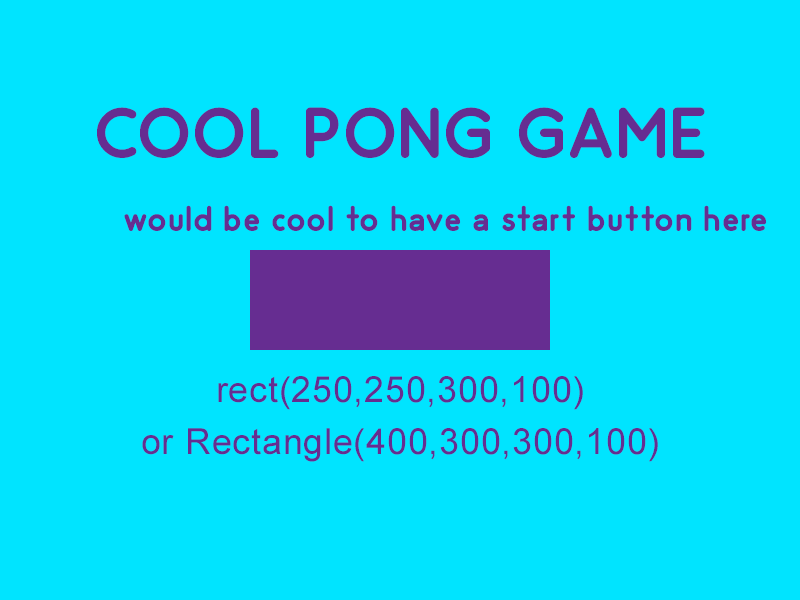
<style>
.page{position:relative;width:800px;height:600px;background:#00e4ff}
.page>*{position:absolute;margin:0}
.t1{font:72px "Odin-Bold";letter-spacing:0.02em;color:#662d91}
.t2{font:36px "Odin-Bold";letter-spacing:0.02em;color:#662d91}
.t3{font:36px "ArialMT";letter-spacing:0.02em;color:#662d91}
</style>
<div class="page">
<p class="t1" style="left:97px;top:107px;width:608px;height:51px">COOL PONG GAME</p>
<p class="t2" style="left:124px;top:205px;width:643px;height:26px">would be cool to have a start button here</p>
<p class="t3" style="left:218px;top:376px;width:365px;height:34px">rect(250,250,300,100)</p>
<p class="t3" style="left:142px;top:428px;width:516px;height:34px">or Rectangle(400,300,300,100)</p>
</div>
